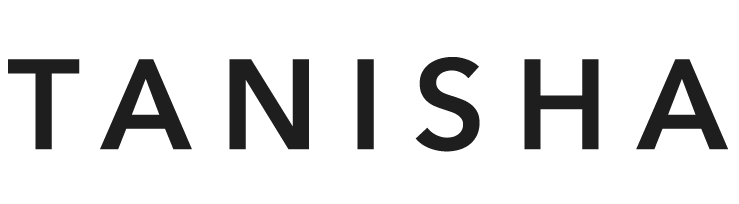
<style>
.page{position:relative;width:739px;height:204px;background:#ffffff}
.page>*{position:absolute;margin:0}
.t1{font:126.7px "AvenirNext-DemiBold";letter-spacing:0.23em;color:#1e1e1e}
</style>
<div class="page">
<p class="t1" style="left:8px;top:57px;width:720px;height:95px">TANISHA</p>
</div>
